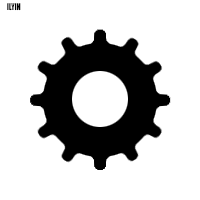
<style>
.page{position:relative;width:200px;height:200px;background:#ffffff}
.page>*{position:absolute;margin:0}
.t1{font:8.4px "Impact";color:#000000;scale:0.86 1}
</style>
<div class="page">
<p class="t1" style="left:7px;top:3px;width:14px;height:8px">ILYIN</p>
</div>
